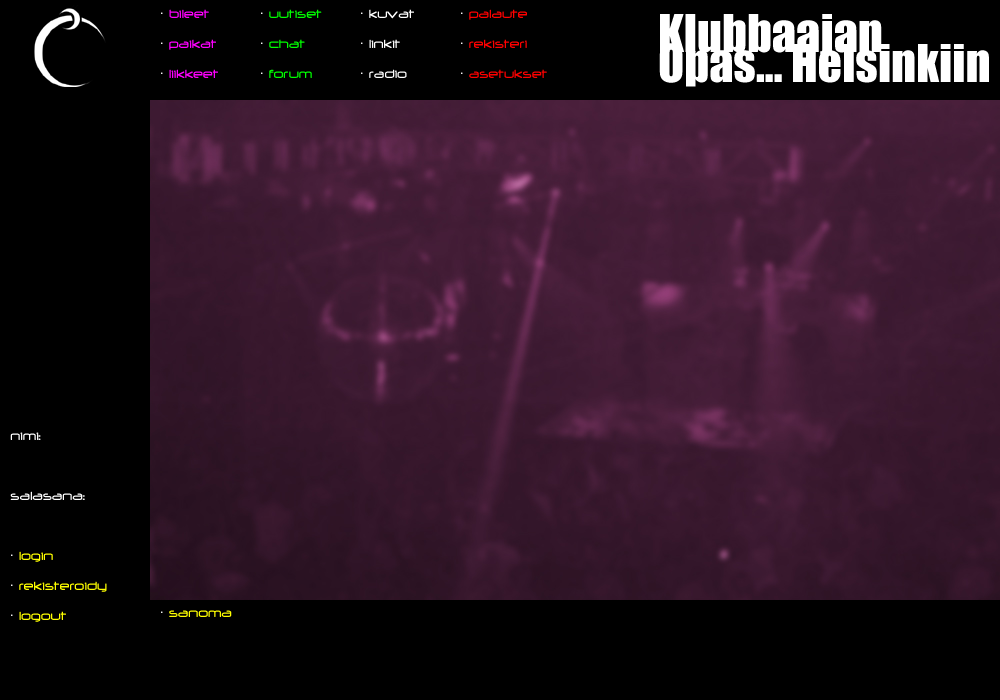
<style>
.page{position:relative;width:1000px;height:700px;background:#000000}
.page>*{position:absolute;margin:0}
.t1{font:14px/30px "NeuropolMedium";color:#ff00ff}
.t2{font:14px/30px "TimesNewRomanPSMT";color:#ffffff}
.t3{font:14px/30px "NeuropolMedium";color:#00ff00}
.t4{font:14px/30px "NeuropolMedium";color:#ffffff}
.t5{font:14px/30px "NeuropolMedium";color:#ff0000}
.t6{font:48px/30px "Impact";color:#ffffff}
.t7{font:14px/30px "NeuropolMedium";color:#ffff00}
.t8{font:14px "NeuropolMedium";color:#ffff00}
.t9{font:14px "TimesNewRomanPSMT";color:#ffffff}
</style>
<div class="page">
<p class="t1" style="left:161px;top:9px;width:57px;height:69px"><span class="t2">· </span>bileet<br><span class="t2">· </span>paikat<br><span class="t2">· </span>liikkeet</p>
<p class="t3" style="left:261px;top:9px;width:61px;height:69px"><span class="t2">· </span>uutiset<br><span class="t2">· </span>chat<br><span class="t2">· </span>forum</p>
<p class="t4" style="left:361px;top:9px;width:53px;height:69px"><span class="t2">·</span> kuvat<br><span class="t2">·</span> linkit<br><span class="t2">·</span> radio</p>
<p class="t5" style="left:461px;top:9px;width:86px;height:69px"><span class="t2">· </span>palaute<br><span class="t2">·</span> rekisteri<br><span class="t2">·</span> asetukset</p>
<p class="t6" style="left:659px;top:14px;width:330px;height:73px">Klubbaajan<br>Opas... Helsinkiin</p>
<p class="t4" style="left:10px;top:432px;width:97px;height:190px">nimi:<br><br>salasana:<br><br><span class="t2">· </span><span class="t7">login<br></span><span class="t2">· </span><span class="t7">rekisteroidy<br></span><span class="t2">·</span><span class="t7"> logout</span></p>
<p class="t8" style="left:161px;top:610px;width:71px;height:7px"><span class="t9">· </span>sanoma</p>
</div>
